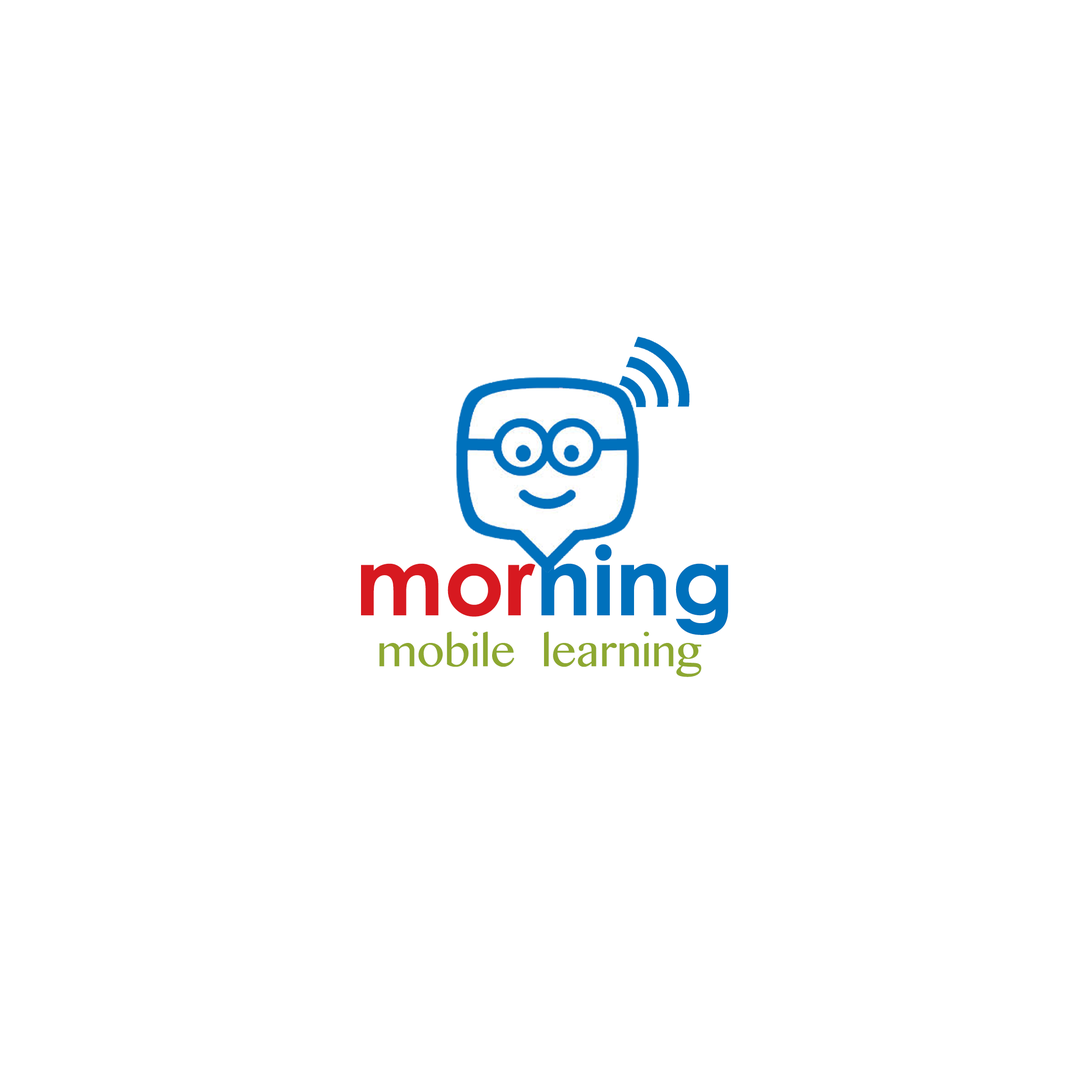
<style>
.page{position:relative;width:1092px;height:1092px;background:#ffffff}
.page>*{position:absolute;margin:0}
.t1{font:94.6px "CenturyGothic-Bold";color:#0071bc}
.t2{font:94.6px "CenturyGothic-Bold";color:#d71920}
.t3{font:43.6px "TamilMN";color:#8da831}
</style>
<div class="page">
<p class="t1" style="left:361px;top:544px;width:367px;height:91px"><span class="t2">mor</span>ning</p>
<p class="t3" style="left:379px;top:632px;width:322px;height:45px">mobile  learning</p>
</div>
